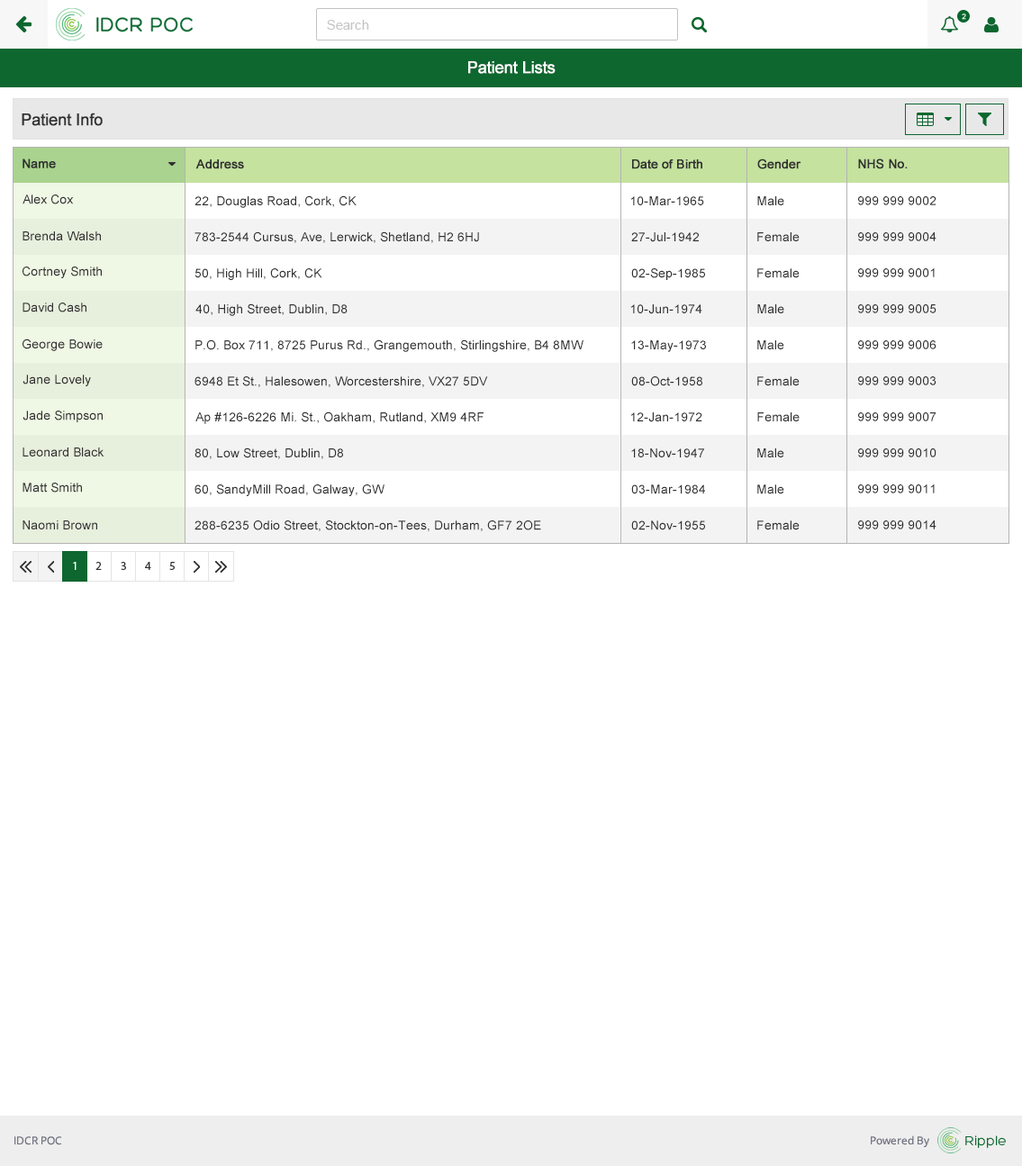
<style>
.page{position:relative;width:1022px;height:1166px;background:#ffffff}
.page>*{position:absolute;margin:0}
.t1{font:16.2px "ArialMT";color:#ffffff;font-weight:bold}
.t2{font:16.2px "ArialMT";color:#303030;font-weight:bold}
.t3{font:12.6px "ArialMT";color:#303030;font-weight:bold}
.t4{font:12.6px "ArialMT";color:#303030}
</style>
<div class="page">
<p class="t1" style="left:468px;top:61px;width:88px;height:13px">Patient Lists</p>
<p class="t2" style="left:22px;top:113px;width:81px;height:13px">Patient Info</p>
<p class="t3" style="left:23px;top:159px;width:33px;height:9px">Name</p>
<p class="t3" style="left:195px;top:159px;width:49px;height:10px">Address</p>
<p class="t3" style="left:632px;top:159px;width:71px;height:10px">Date of Birth</p>
<p class="t3" style="left:757px;top:159px;width:45px;height:10px">Gender</p>
<p class="t3" style="left:858px;top:159px;width:50px;height:10px">NHS No.</p>
<p class="t4" style="left:23px;top:195px;width:51px;height:9px">Alex Cox</p>
<p class="t4" style="left:195px;top:195px;width:162px;height:13px">22, Douglas Road, Cork, CK</p>
<p class="t4" style="left:630px;top:196px;width:74px;height:9px">10-Mar-1965</p>
<p class="t4" style="left:757px;top:196px;width:28px;height:9px">Male</p>
<p class="t4" style="left:858px;top:196px;width:79px;height:9px">999 999 9002</p>
<p class="t4" style="left:23px;top:231px;width:78px;height:9px">Brenda Walsh</p>
<p class="t4" style="left:195px;top:231px;width:284px;height:12px">783-2544 Cursus, Ave, Lerwick, Shetland, H2 6HJ</p>
<p class="t4" style="left:631px;top:232px;width:68px;height:10px">27-Jul-1942</p>
<p class="t4" style="left:757px;top:232px;width:43px;height:9px">Female</p>
<p class="t4" style="left:858px;top:232px;width:79px;height:9px">999 999 9004</p>
<p class="t4" style="left:23px;top:267px;width:79px;height:11px">Cortney Smith</p>
<p class="t4" style="left:195px;top:268px;width:127px;height:12px">50, High Hill, Cork, CK</p>
<p class="t4" style="left:631px;top:268px;width:74px;height:12px">02-Sep-1985</p>
<p class="t4" style="left:757px;top:268px;width:43px;height:10px">Female</p>
<p class="t4" style="left:858px;top:268px;width:77px;height:9px">999 999 9001</p>
<p class="t4" style="left:23px;top:303px;width:63px;height:10px">David Cash</p>
<p class="t4" style="left:195px;top:304px;width:153px;height:12px">40, High Street, Dublin, D8</p>
<p class="t4" style="left:630px;top:304px;width:73px;height:10px">10-Jun-1974</p>
<p class="t4" style="left:757px;top:304px;width:28px;height:9px">Male</p>
<p class="t4" style="left:858px;top:304px;width:79px;height:9px">999 999 9005</p>
<p class="t4" style="left:23px;top:339px;width:80px;height:12px">George Bowie</p>
<p class="t4" style="left:195px;top:340px;width:389px;height:12px">P.O. Box 711, 8725 Purus Rd., Grangemouth, Stirlingshire, B4 8MW</p>
<p class="t4" style="left:631px;top:340px;width:75px;height:12px">13-May-1973</p>
<p class="t4" style="left:757px;top:340px;width:28px;height:9px">Male</p>
<p class="t4" style="left:858px;top:340px;width:79px;height:9px">999 999 9006</p>
<p class="t4" style="left:23px;top:375px;width:68px;height:11px">Jane Lovely</p>
<p class="t4" style="left:195px;top:376px;width:293px;height:12px">6948 Et St., Halesowen, Worcestershire, VX27 5DV</p>
<p class="t4" style="left:631px;top:376px;width:72px;height:10px">08-Oct-1958</p>
<p class="t4" style="left:757px;top:376px;width:43px;height:10px">Female</p>
<p class="t4" style="left:858px;top:376px;width:79px;height:10px">999 999 9003</p>
<p class="t4" style="left:23px;top:411px;width:80px;height:11px">Jade Simpson</p>
<p class="t4" style="left:195px;top:412px;width:289px;height:12px">Ap #126-6226 Mi. St., Oakham, Rutland, XM9 4RF</p>
<p class="t4" style="left:630px;top:413px;width:73px;height:9px">12-Jan-1972</p>
<p class="t4" style="left:757px;top:413px;width:43px;height:9px">Female</p>
<p class="t4" style="left:858px;top:413px;width:79px;height:9px">999 999 9007</p>
<p class="t4" style="left:23px;top:448px;width:81px;height:9px">Leonard Black</p>
<p class="t4" style="left:195px;top:448px;width:148px;height:11px">80, Low Street, Dublin, D8</p>
<p class="t4" style="left:631px;top:449px;width:73px;height:9px">18-Nov-1947</p>
<p class="t4" style="left:757px;top:449px;width:28px;height:9px">Male</p>
<p class="t4" style="left:858px;top:449px;width:79px;height:9px">999 999 9010</p>
<p class="t4" style="left:23px;top:483px;width:59px;height:10px">Matt Smith</p>
<p class="t4" style="left:195px;top:485px;width:190px;height:11px">60, SandyMill Road, Galway, GW</p>
<p class="t4" style="left:631px;top:485px;width:74px;height:9px">03-Mar-1984</p>
<p class="t4" style="left:757px;top:485px;width:28px;height:9px">Male</p>
<p class="t4" style="left:858px;top:485px;width:77px;height:9px">999 999 9011</p>
<p class="t4" style="left:23px;top:521px;width:74px;height:9px">Naomi Brown</p>
<p class="t4" style="left:195px;top:521px;width:346px;height:11px">288-6235 Odio Street, Stockton-on-Tees, Durham, GF7 2OE</p>
<p class="t4" style="left:631px;top:521px;width:74px;height:10px">02-Nov-1955</p>
<p class="t4" style="left:757px;top:521px;width:43px;height:10px">Female</p>
<p class="t4" style="left:858px;top:521px;width:79px;height:9px">999 999 9014</p>
</div>
